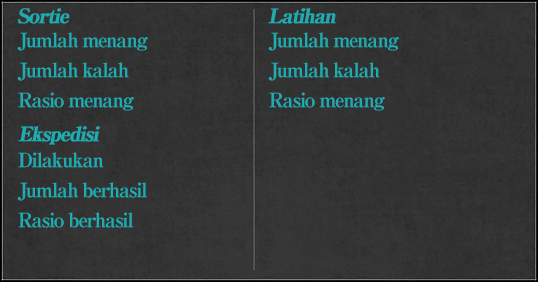
<style>
.page{position:relative;width:538px;height:282px}
.page>*{position:absolute;margin:0}
.t1{font:20px "RyuminPro-ExBold";letter-spacing:-0.08em;color:#1dacb1;font-weight:bold;font-style:italic}
.t2{font:20px/30px "RyuminPro-ExBold";letter-spacing:-0.08em;color:#1dacb1}
</style>
<div class="page">
<p class="t1" style="left:17px;top:8px;width:53px;height:16px">Sortie</p>
<p class="t1" style="left:268px;top:8px;width:68px;height:16px">Latihan</p>
<p class="t2" style="left:17px;top:32px;width:131px;height:79px">Jumlah menang<br>Jumlah kalah<br>Rasio menang</p>
<p class="t2" style="left:268px;top:32px;width:131px;height:79px">Jumlah menang<br>Jumlah kalah<br>Rasio menang</p>
<p class="t1" style="left:18px;top:126px;width:82px;height:19px">Ekspedisi</p>
<p class="t2" style="left:17px;top:152px;width:130px;height:76px">Dilakukan<br>Jumlah berhasil<br>Rasio berhasil</p>
</div>
